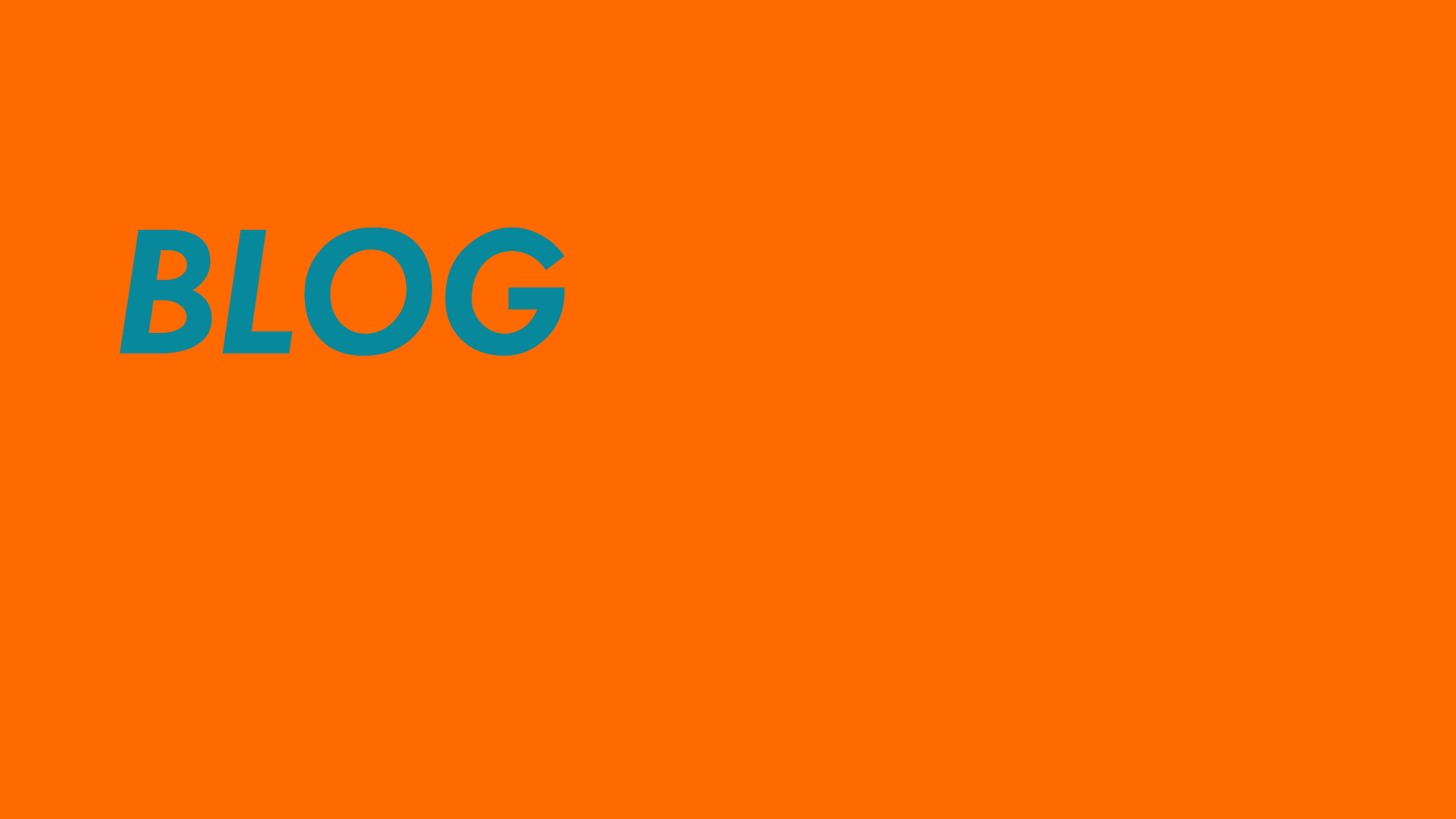
<style>
.page{position:relative;width:1456px;height:819px;background:#ff6a00}
.page>*{position:absolute;margin:0}
.t1{font:192.6px "TwCenMT-BoldItalic";color:#07889b}
</style>
<div class="page">
<p class="t1" style="left:120px;top:227px;width:445px;height:129px">BLOG</p>
</div>
